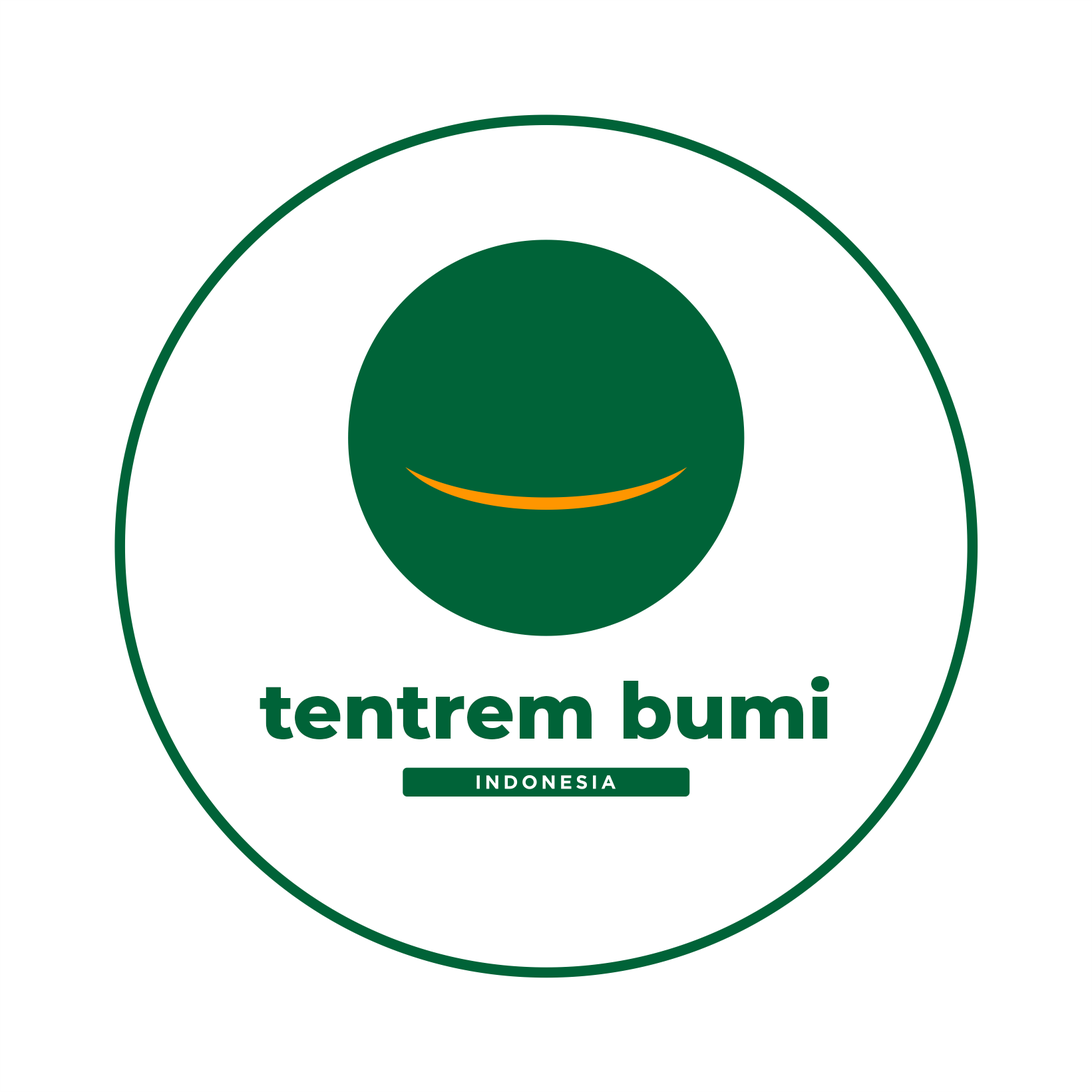
<style>
.page{position:relative;width:1092px;height:1092px;background:#ffffff}
.page>*{position:absolute;margin:0}
.t1{font:77.6px "Montserrat-ExtraBold";color:#006338}
</style>
<div class="page">
<p class="t1" style="left:260px;top:676px;width:569px;height:64px">tentrem bumi</p>
</div>
